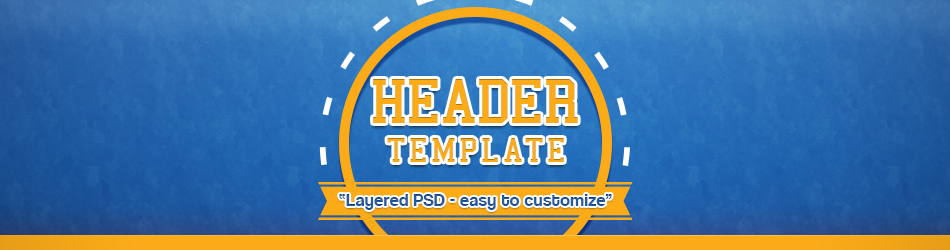
<style>
.page{position:relative;width:950px;height:250px}
.page>*{position:absolute;margin:0}
.t1{font:64.4px "College";color:#fbab18}
.t2{font:34.4px "College";letter-spacing:0.1em;color:#fbab18}
.t3{font:18px "CoolveticaRg-Regular";letter-spacing:0.02em;color:#215ba6}
</style>
<div class="page">
<p class="t1" style="left:373px;top:79px;width:205px;height:44px">HEADER</p>
<p class="t2" style="left:387px;top:138px;width:177px;height:24px">TEMPLATE</p>
<p class="t3" style="left:339px;top:194px;width:273px;height:16px">“Layered PSD - easy to customize”</p>
</div>
